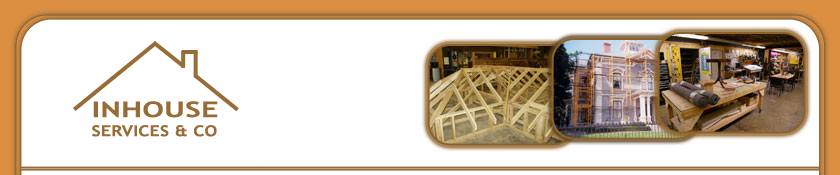
<style>
.page{position:relative;width:840px;height:175px;background:#ffffff}
.page>*{position:absolute;margin:0}
.t1{font:21.5px "TrebuchetMS-Bold";letter-spacing:0.01em;color:#976c37;scale:1.42 1}
.t2{font:15px "TrebuchetMS-Bold";letter-spacing:0.01em;color:#976c37;scale:1.2 1}
</style>
<div class="page">
<p class="t1" style="left:93px;top:101px;width:125px;height:17px">INHOUSE</p>
<p class="t2" style="left:92px;top:125px;width:125px;height:12px">SERVICES &amp; CO</p>
</div>
